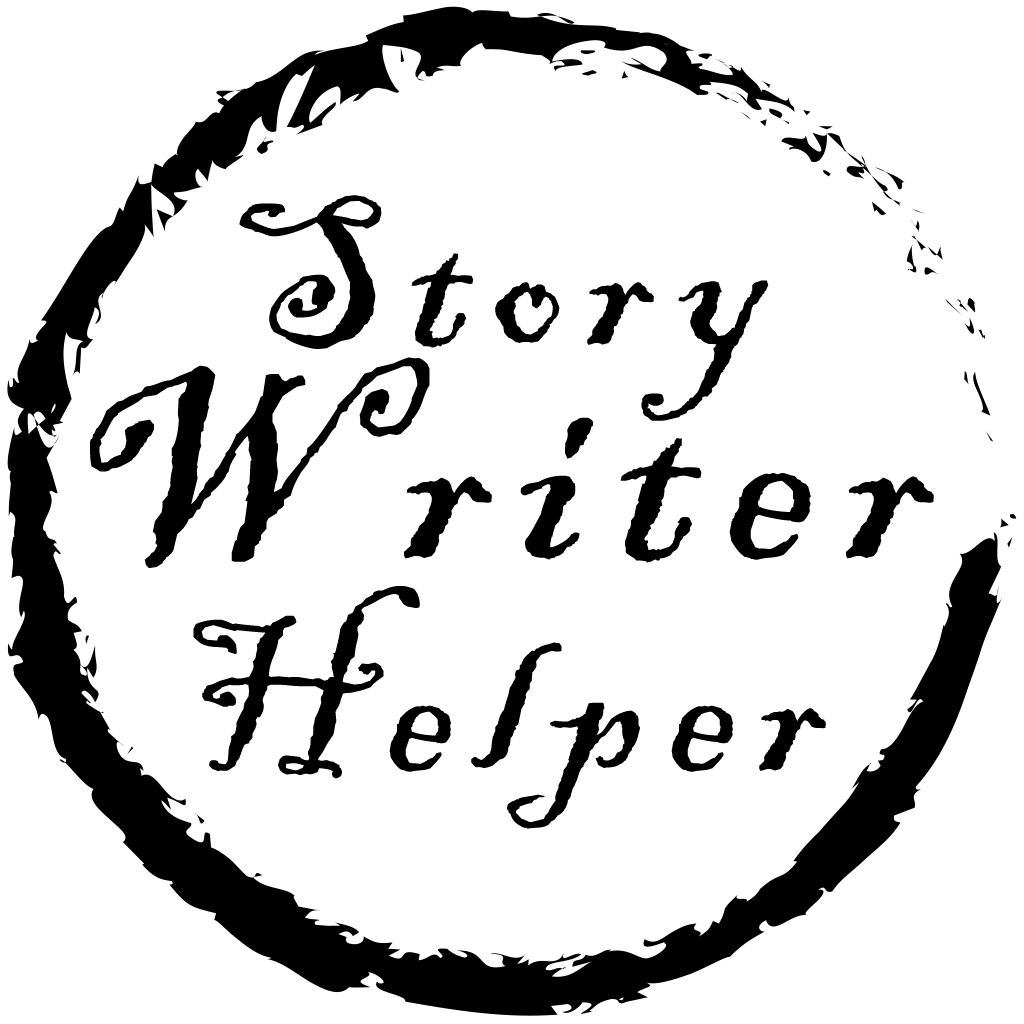
<style>
.page{position:relative;width:1024px;height:1024px;background:#ffffff}
.page>*{position:absolute;margin:0}
.t1{font:290px/213px "BlackadderITC-Regular";letter-spacing:0.1em;color:#000000}
.t2{font:220px/213px "BlackadderITC-Regular";letter-spacing:0.1em;color:#000000}
</style>
<div class="page">
<p class="t1" style="left:90px;top:195px;width:844px;height:634px;text-align:center"><span class="t2">Story<br></span>Writer<br><span class="t2">Helper</span></p>
</div>
